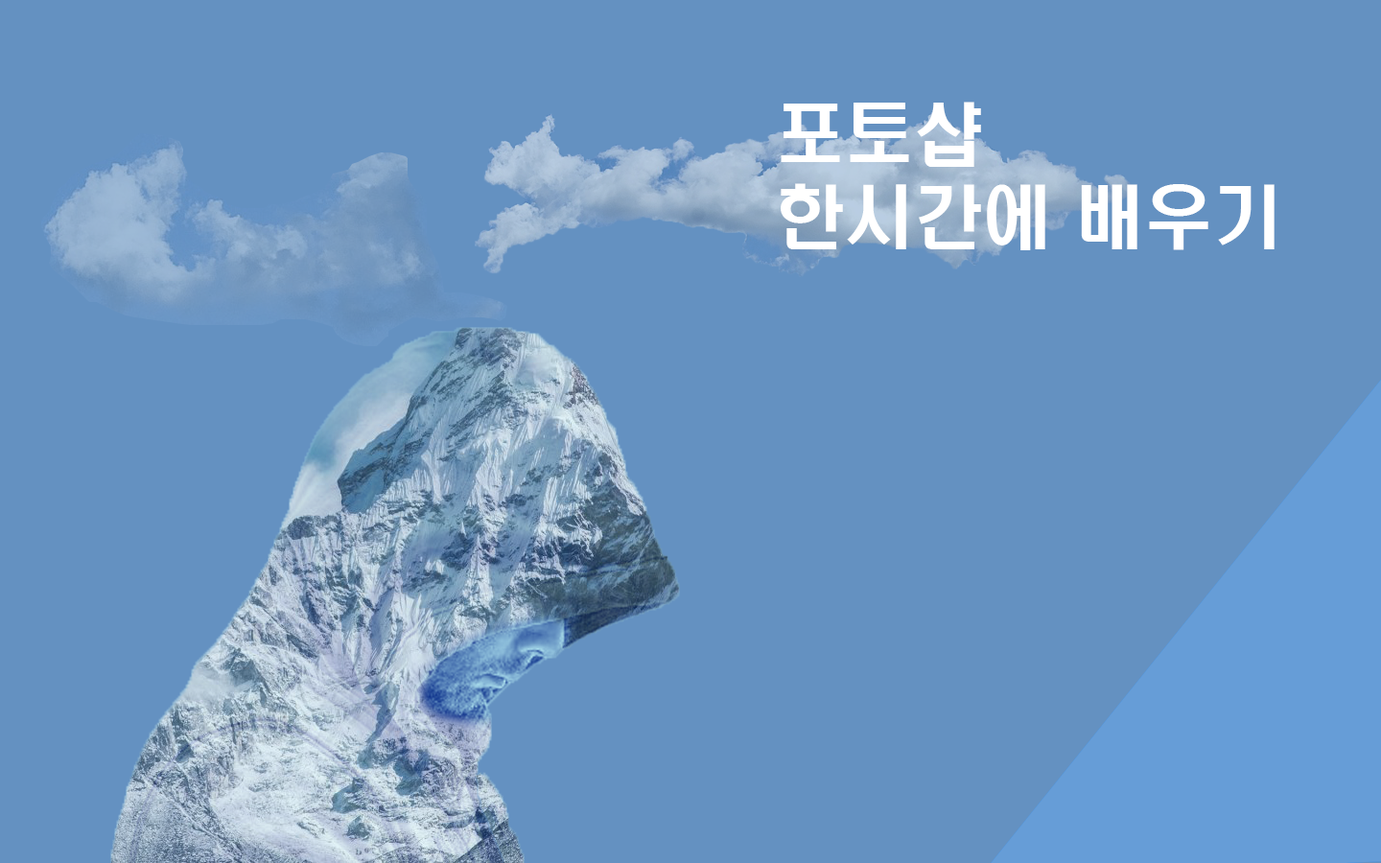
<style>
.page{position:relative;width:1381px;height:863px;background:#6491c1}
.page>*{position:absolute;margin:0}
.t1{font:69.1px "H2hdrM";color:#ffffff}
</style>
<div class="page">
<p class="t1" style="left:781px;top:102px;width:494px;height:148px">포토샵<br>한시간에 배우기</p>
</div>
